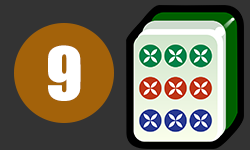
<style>
.page{position:relative;width:250px;height:150px;background:#333333}
.page>*{position:absolute;margin:0}
.t1{font:66.7px "Impact";color:#ffffff;font-weight:bold}
</style>
<div class="page">
<p class="t1" style="left:48px;top:45px;width:33px;height:56px">9</p>
</div>
